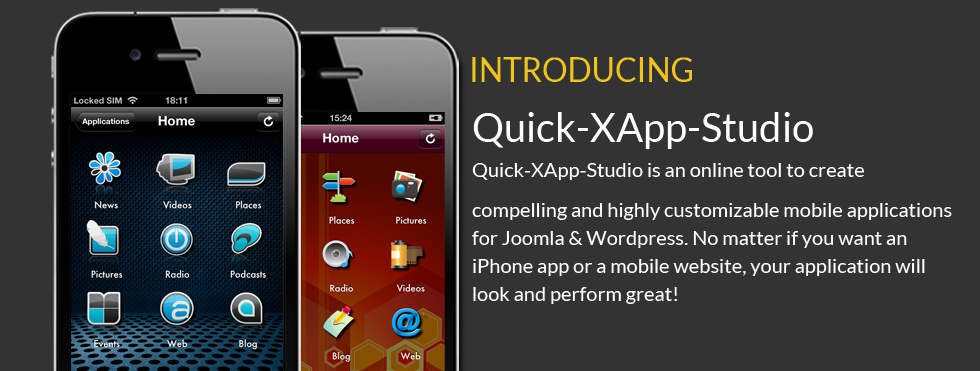
<style>
.page{position:relative;width:980px;height:371px;background:#333333}
.page>*{position:absolute;margin:0}
.t1{font:32.7px "Lato-Regular";color:#f1c41b;text-transform:uppercase}
.t2{font:20px/28px "Lato-Regular";color:#ffffff}
.t3{font:40px/20px "Lato-Regular";color:#ffffff}
.t4{font:20px/35px "Lato-Regular";color:#ffffff}
.t5{font:20px/40px "Lato-Regular";color:#ffffff}
</style>
<div class="page">
<p class="t1" style="left:472px;top:57px;width:220px;height:25px">Introducing</p>
<p class="t2" style="left:472px;top:112px;width:480px;height:192px"><span class="t3">Quick-XApp-Studio<br></span><span class="t4">Quick-XApp-Studio is an online tool to create <br></span><span class="t5">compelling </span><span class="t4">and highly </span>customizable mobile applications for Joomla &amp; Wordpress. No matter if you want an iPhone app or a mobile website, your application will look and perform great!</p>
</div>
